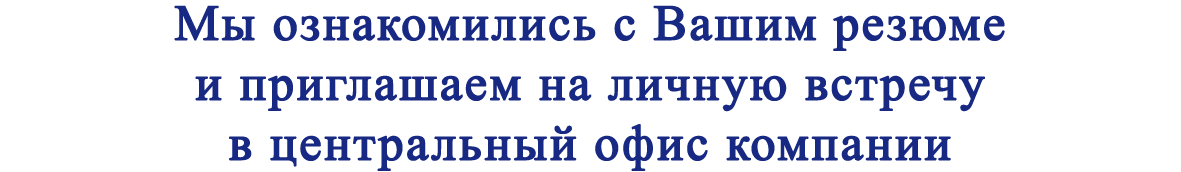
<style>
.page{position:relative;width:1181px;height:172px;background:#ffffff}
.page>*{position:absolute;margin:0}
.t1{font:50px "TimesNewRomanPSMT";letter-spacing:0.025em;color:#182983;font-weight:bold}
</style>
<div class="page">
<p class="t1" style="left:174px;top:5px;width:831px;height:166px;text-align:center">Мы ознакомились с Вашим резюмe <br>и приглашаем на личную встречу <br>в центральный офис компании</p>
</div>
